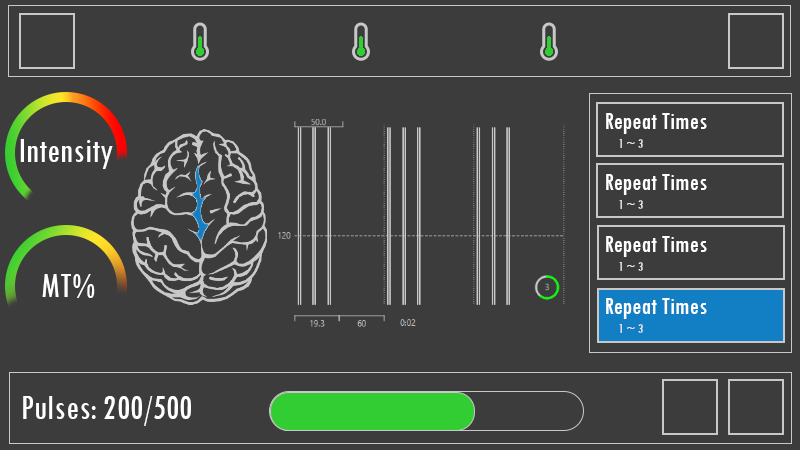
<style>
.page{position:relative;width:800px;height:450px;background:#3c3c3c}
.page>*{position:absolute;margin:0}
.t1{font:26px "TwCenMT-Condensed";color:#ffffff}
.t2{font:36px "TwCenMT-Condensed";color:#ffffff}
.t3{font:14px "TwCenMT-Condensed";color:#e6e6e6}
</style>
<div class="page">
<p class="t1" style="left:606px;top:113px;width:101px;height:21px">Repeat Times</p>
<p class="t2" style="left:20px;top:139px;width:93px;height:30px">Intensity</p>
<p class="t3" style="left:619px;top:139px;width:24px;height:9px">1 ~ 3</p>
<p class="t1" style="left:606px;top:174px;width:101px;height:21px">Repeat Times</p>
<p class="t3" style="left:619px;top:200px;width:24px;height:9px">1 ~ 3</p>
<p class="t1" style="left:606px;top:236px;width:101px;height:21px">Repeat Times</p>
<p class="t3" style="left:619px;top:262px;width:24px;height:9px">1 ~ 3</p>
<p class="t2" style="left:42px;top:274px;width:53px;height:24px">MT%</p>
<p class="t1" style="left:606px;top:298px;width:101px;height:21px">Repeat Times</p>
<p class="t3" style="left:619px;top:324px;width:24px;height:9px">1 ~ 3</p>
<p class="t2" style="left:23px;top:396px;width:168px;height:30px">Pulses: 200/500</p>
</div>
